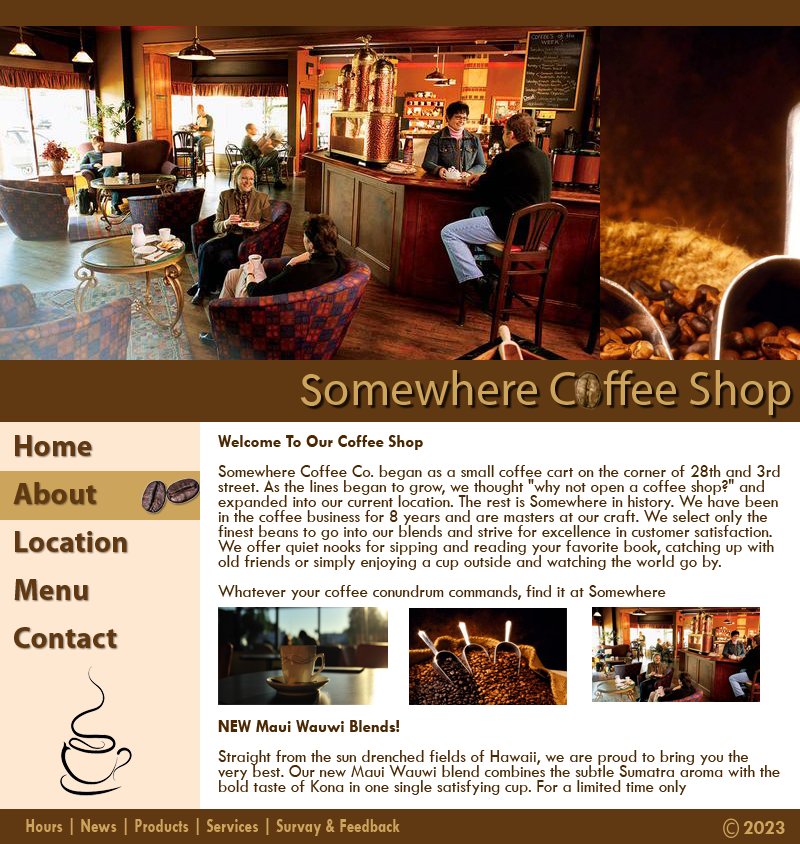
<style>
.page{position:relative;width:800px;height:844px;background:#ffffff}
.page>*{position:absolute;margin:0}
.t1{font:48px "MyriadPro-Regular";color:#cca45c}
.t2{font:48px "TwCenMT-Regular";color:#cca45c}
.t3{font:30px/48px "MyriadPro-Bold";color:#603913}
.t4{font:18px/15px "TwCenMT-Regular";color:#4b2802;scale:0.94 1}
.t5{font:18px/15px "TwCenMT-Bold";color:#4b2802;scale:0.94 1}
.t6{font:20px "TwCenMT-Bold";color:#cca45c;scale:0.77 1}
.t7{font:20px "TwCenMT-Bold";color:#cca45c}
</style>
<div class="page">
<p class="t1" style="left:300px;top:370px;width:491px;height:45px"><span class="t2">S</span>omewhere Coffee Shop</p>
<p class="t3" style="left:13px;top:435px;width:114px;height:213px">Home<br>About<br>Location<br>Menu<br>Contact</p>
<p class="t4" style="left:218px;top:435px;width:562px;height:360px"><span class="t5">Welcome To Our Coffee Shop<br><br></span>Somewhere Coffee Co. began as a small coffee cart on the corner of 28th and 3rd street. As the lines began to grow, we thought "why not open a coffee shop?" and expanded into our current location. The rest is Somewhere in history. We have been in the coffee business for 8 years and are masters at our craft. We select only the finest beans to go into our blends and strive for excellence in customer satisfaction. We offer quiet nooks for sipping and reading your favorite book, catching up with old friends or simply enjoying a cup outside and watching the world go by.<br><br>Whatever your coffee conundrum commands, find it at Somewhere<br><br><br><br><br><br><br><br><br><span class="t5">NEW Maui Wauwi Blends!<br><br></span>Straight from the sun drenched fields of Hawaii, we are proud to bring you the very best. Our new Maui Wauwi blend combines the subtle Sumatra aroma with the bold taste of Kona in one single satisfying cup. For a limited time only</p>
<p class="t6" style="left:26px;top:818px;width:374px;height:18px">Hours | News | Products | Services | Survay &amp; Feedback</p>
<p class="t7" style="left:743px;top:821px;width:42px;height:13px">2023</p>
</div>
